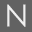
<style>
.page{position:relative;width:32px;height:32px;background:#626262}
.page>*{position:absolute;margin:0}
.t1{font:30px "GeosansLight";letter-spacing:0.085em;color:#efefef;font-weight:bold}
</style>
<div class="page">
<p class="t1" style="left:7px;top:4px;width:19px;height:23px">N</p>
</div>
